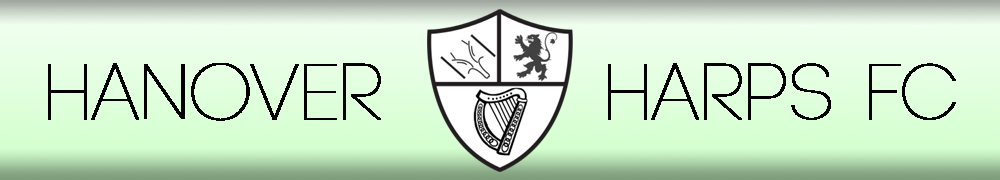
<style>
.page{position:relative;width:1000px;height:180px}
.page>*{position:absolute;margin:0}
.t1{font:80px "Code-Light";color:#000000;text-transform:uppercase;font-weight:bold}
</style>
<div class="page">
<p class="t1" style="left:48px;top:63px;width:333px;height:58px">Hanover</p>
<p class="t1" style="left:608px;top:63px;width:348px;height:57px">Harps FC</p>
</div>
